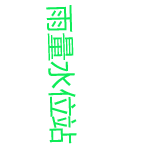
<style>
.page{position:relative;width:154px;height:154px;background:#ffffff}
.page>*{position:absolute;margin:0}
.t1{font:27.9px "MicrosoftYaHei";color:#0eec57}
</style>
<div class="page">
<p class="t1" style="left:46px;top:5px;width:31px;height:139px;rotate:88deg">雨量水位站</p>
</div>
